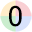
<style>
.page{position:relative;width:32px;height:32px;background:#ffffff}
.page>*{position:absolute;margin:0}
.t1{font:27.9px "ArialMT";letter-spacing:-0.035em;color:#000000;scale:0.96 1}
</style>
<div class="page">
<p class="t1" style="left:9px;top:5px;width:13px;height:22px">0</p>
</div>
